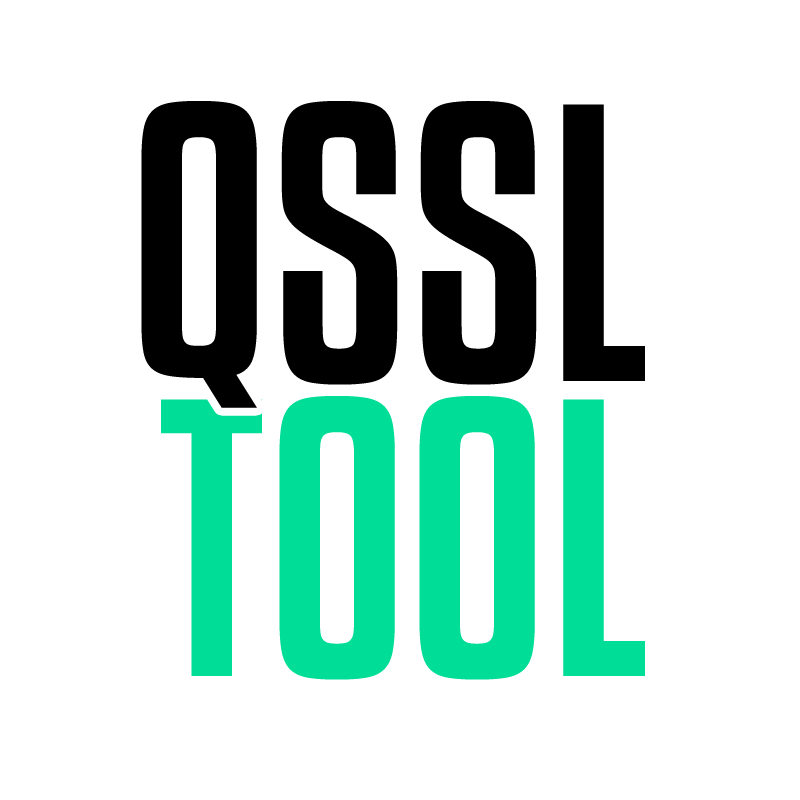
<style>
.page{position:relative;width:800px;height:800px;background:#ffffff}
.page>*{position:absolute;margin:0}
.t1{font:350px "KenyanCoffeeRg-Regular";color:#000000}
.t2{font:350px "KenyanCoffeeRg-Regular";color:#00dd97}
</style>
<div class="page">
<p class="t1" style="left:141px;top:101px;width:504px;height:307px">QSSL</p>
<p class="t2" style="left:161px;top:396px;width:484px;height:284px">TOOL</p>
</div>
